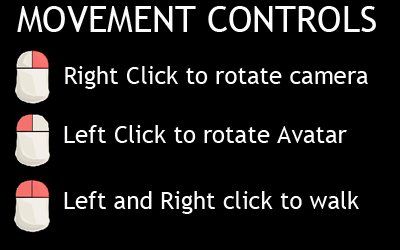
<style>
.page{position:relative;width:400px;height:250px;background:#000000}
.page>*{position:absolute;margin:0}
.t1{font:36px "TrebuchetMS";color:#fcfcfc}
.t2{font:24px "TrebuchetMS";color:#fcfcfc}
</style>
<div class="page">
<p class="t1" style="left:17px;top:6px;width:359px;height:26px">MOVEMENT CONTROLS</p>
<p class="t2" style="left:65px;top:66px;width:303px;height:23px">Right Click to rotate camera</p>
<p class="t2" style="left:64px;top:125px;width:283px;height:18px">Left Click to rotate Avatar</p>
<p class="t2" style="left:64px;top:191px;width:295px;height:23px">Left and Right click to walk</p>
</div>
